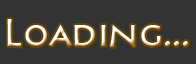
<style>
.page{position:relative;width:196px;height:64px;background:#333333}
.page>*{position:absolute;margin:0}
.t1{font:35px "Pericles"}
</style>
<div class="page">
<p class="t1" style="left:7px;top:19px;width:181px;height:28px">Loading...</p>
</div>
